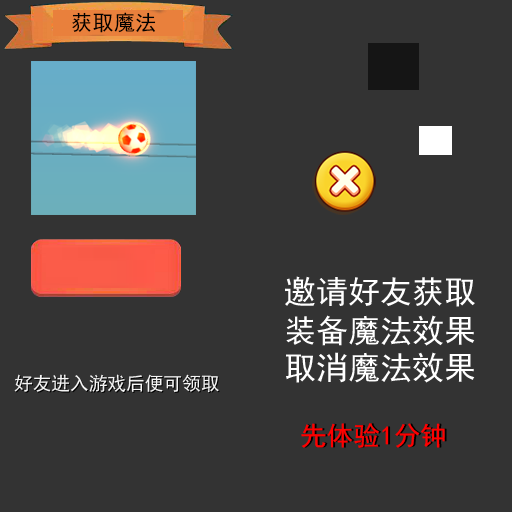
<style>
.page{position:relative;width:512px;height:512px;background:#333333}
.page>*{position:absolute;margin:0}
.t1{font:32px "SimHei";color:#ffffff}
.t2{font:26.7px "SimHei";color:#ff0000}
.t3{font:26.7px "SimHei"}
</style>
<div class="page">
<p class="t1" style="left:285px;top:276px;width:190px;height:31px">邀请好友获取</p>
<p class="t1" style="left:286px;top:315px;width:189px;height:31px">装备魔法效果</p>
<p class="t1" style="left:286px;top:352px;width:189px;height:31px">取消魔法效果</p>
<p class="t2" style="left:301px;top:423px;width:144px;height:25px">先体验1分钟</p>
<p class="t3" style="left:303px;top:423px;width:144px;height:25px">先体验1分钟</p>
</div>
